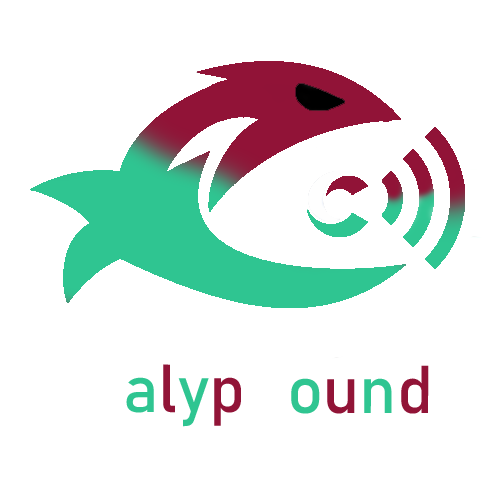
<style>
.page{position:relative;width:500px;height:500px;background:#ffffff}
.page>*{position:absolute;margin:0}
.t1{font:66.7px "Bahnschrift";color:#ffffff}
.t2{font:66.7px "Bahnschrift";color:#2fc692}
.t3{font:66.7px "Bahnschrift";color:#911437}
</style>
<div class="page">
<p class="t1" style="left:86px;top:364px;width:343px;height:63px">C<span class="t2">a</span><span class="t3">l</span><span class="t2">y</span><span class="t3">p</span>S<span class="t2">o</span><span class="t3">u</span><span class="t2">n</span><span class="t3">d</span></p>
</div>
